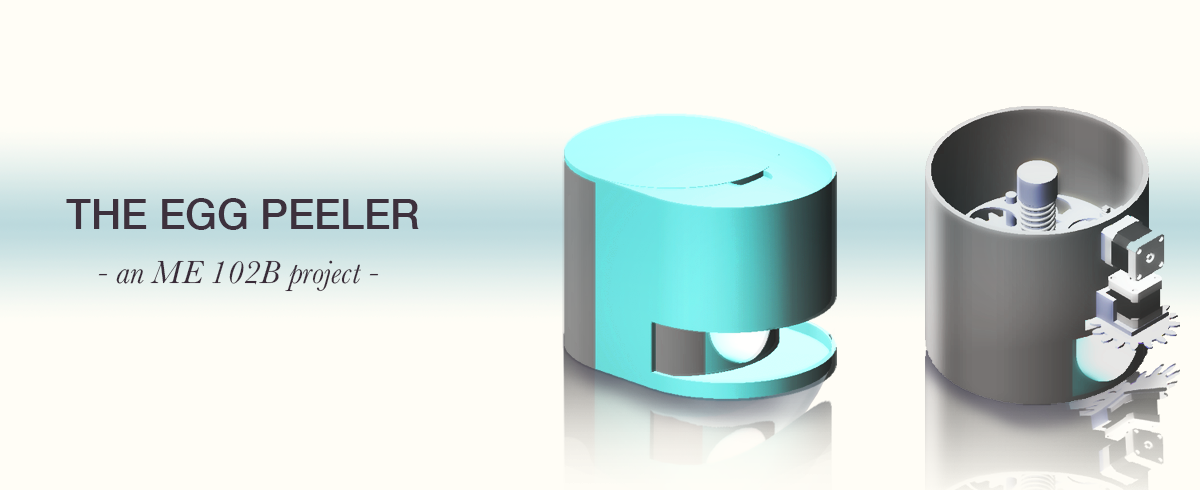
<style>
.page{position:relative;width:1200px;height:490px;background:#fffdf6}
.page>*{position:absolute;margin:0}
.t1{font:41.7px "HelveticaNeue-Medium";color:#392b38}
.t2{font:33.3px "Baskerville-Italic";color:#392b38}
</style>
<div class="page">
<p class="t1" style="left:66px;top:198px;width:353px;height:32px">THE EGG PEELER</p>
<p class="t2" style="left:98px;top:260px;width:281px;height:32px">- an ME 102B project -</p>
</div>
